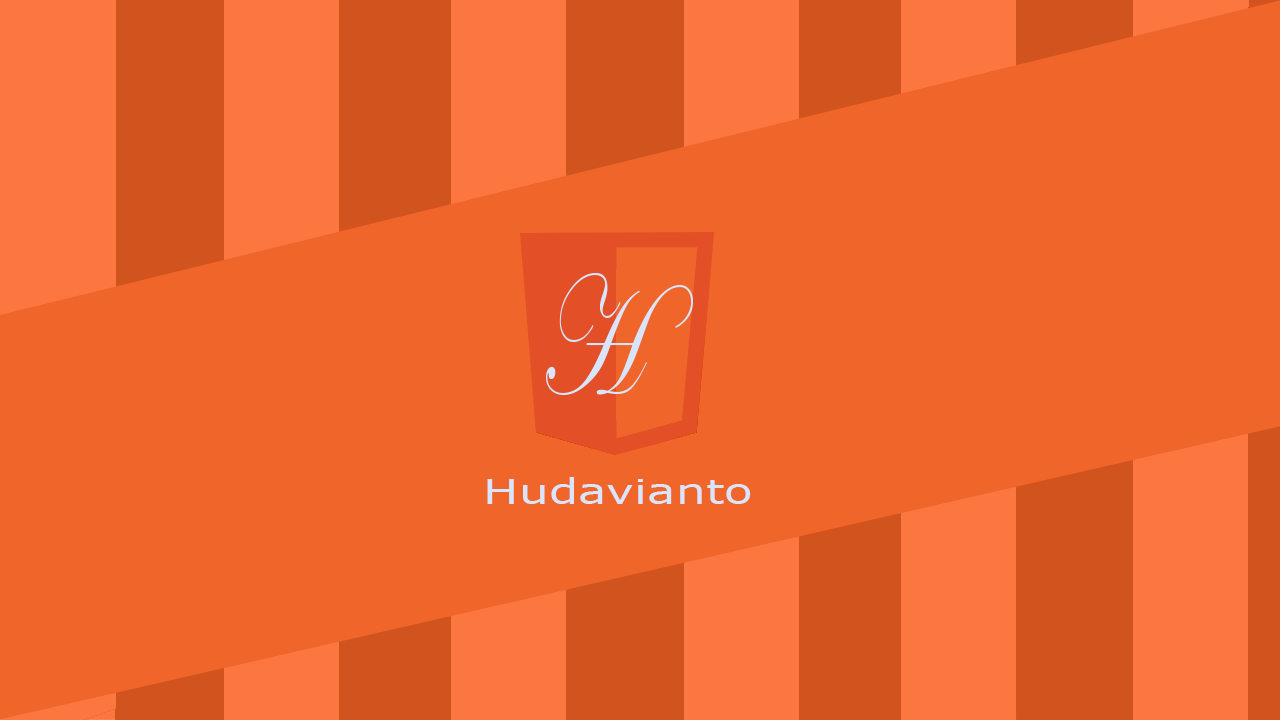
<style>
.page{position:relative;width:1280px;height:720px;background:#ef652a}
.page>*{position:absolute;margin:0}
.t1{font:35.1px "Verdana";color:#d9e5fd;scale:1.35 1}
</style>
<div class="page">
<p class="t1" style="left:487px;top:477px;width:264px;height:27px">Hudavianto</p>
</div>
